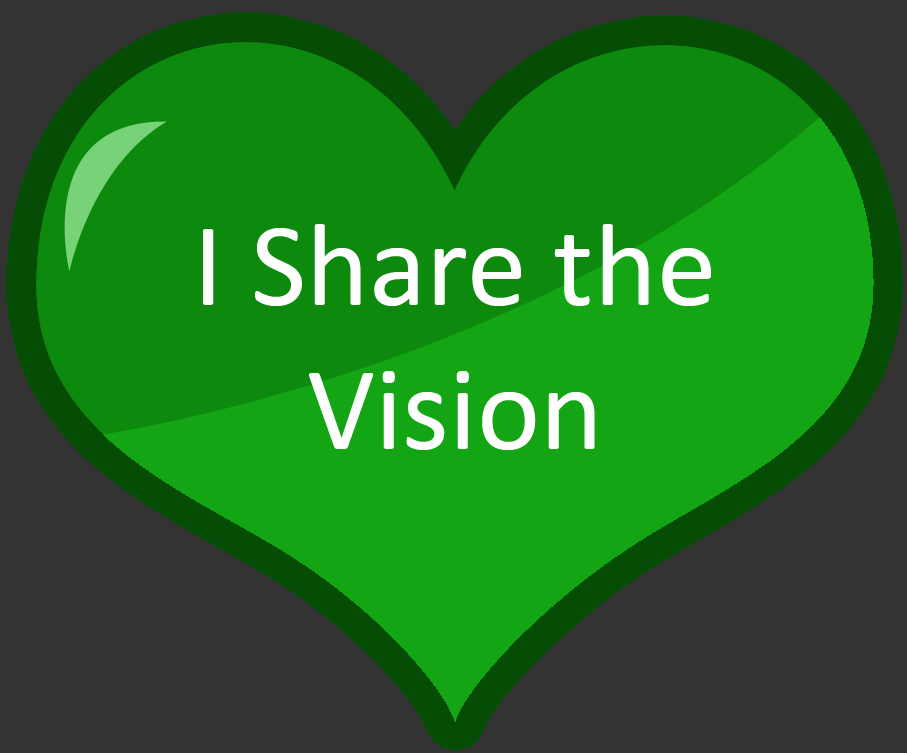
<style>
.page{position:relative;width:907px;height:753px;background:#333333}
.page>*{position:absolute;margin:0}
.t1{font:120px "Calibri";color:#ffffff}
</style>
<div class="page">
<p class="t1" style="left:203px;top:224px;width:508px;height:226px;text-align:center">I Share the Vision</p>
</div>
